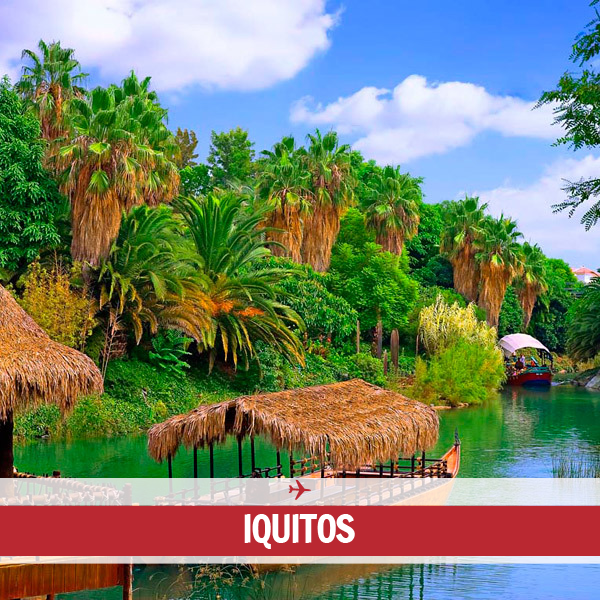
<style>
.page{position:relative;width:600px;height:600px}
.page>*{position:absolute;margin:0}
.t1{font:38.7px "FrancoisOne-Regular";letter-spacing:-0.05em;color:#ffffff;text-transform:uppercase}
</style>
<div class="page">
<p class="t1" style="left:244px;top:514px;width:111px;height:35px">iquitos</p>
</div>
